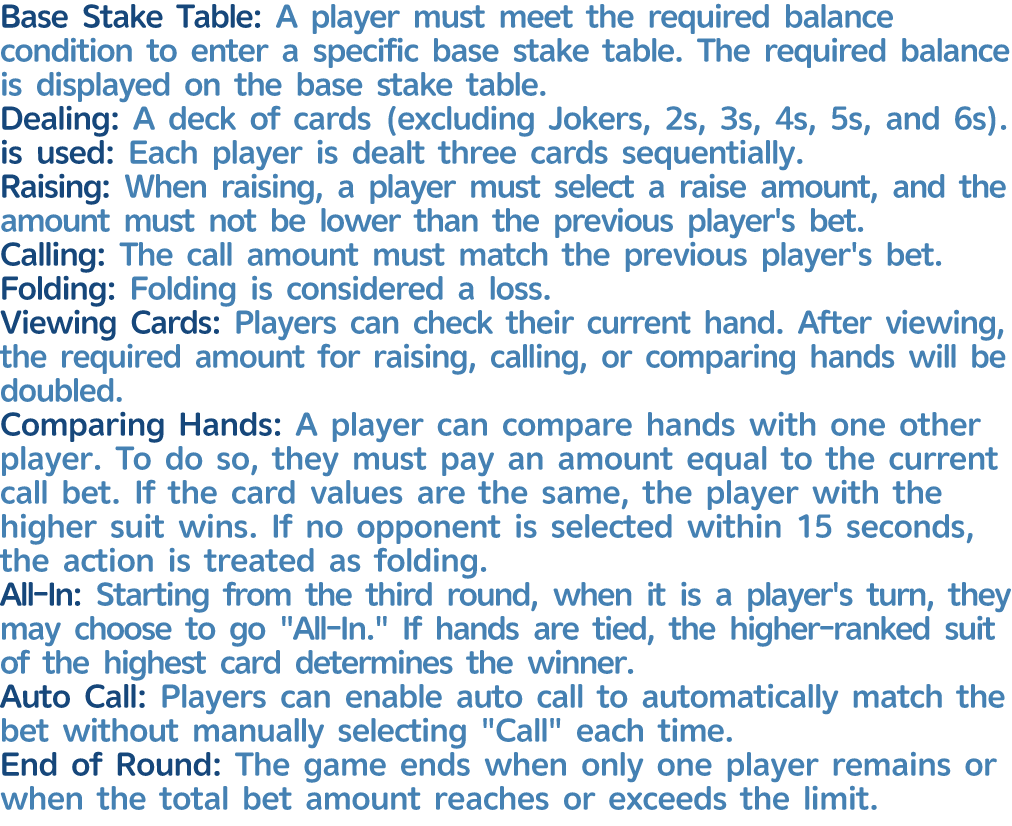
<style>
.page{position:relative;width:1012px;height:826px;background:#ffffff}
.page>*{position:absolute;margin:0}
.t1{font:32px/34px "HYZhengYuan-HEW";letter-spacing:-0.025em;color:#4581b3}
.t2{font:32px/34px "HYZhengYuan-HEW";letter-spacing:-0.025em;color:#16477b}
</style>
<div class="page">
<p class="t1" style="left:0px;top:3px;width:1011px;height:807px"><span class="t2">Base Stake Table: </span>A player must meet the required balance condition to enter a specific base stake table. The required balance is displayed on the base stake table. <br><span class="t2">Dealing: </span>A deck of cards (excluding Jokers, 2s, 3s, 4s, 5s, and 6s).<span class="t2"> is used: </span>Each player is dealt three cards sequentially.<br><span class="t2">Raising: </span>When raising, a player must select a raise amount, and the amount must not be lower than the previous player's bet.<br><span class="t2">Calling: </span>The call amount must match the previous player's bet.<br><span class="t2">Folding: </span>Folding is considered a loss.<br><span class="t2">Viewing Cards: </span>Players can check their current hand. After viewing, the required amount for raising, calling, or comparing hands will be doubled.<br><span class="t2">Comparing Hands: </span>A player can compare hands with one other player. To do so, they must pay an amount equal to the current call bet. If the card values are the same, the player with the higher suit wins. If no opponent is selected within 15 seconds, the action is treated as folding.<br><span class="t2">All-In: </span>Starting from the third round, when it is a player's turn, they may choose to go "All-In." If hands are tied, the higher-ranked suit of the highest card determines the winner.<br><span class="t2">Auto Call: </span>Players can enable auto call to automatically match the bet without manually selecting "Call" each time.<br><span class="t2">End of Round: </span>The game ends when only one player remains or when the total bet amount reaches or exceeds the limit.</p>
</div>
